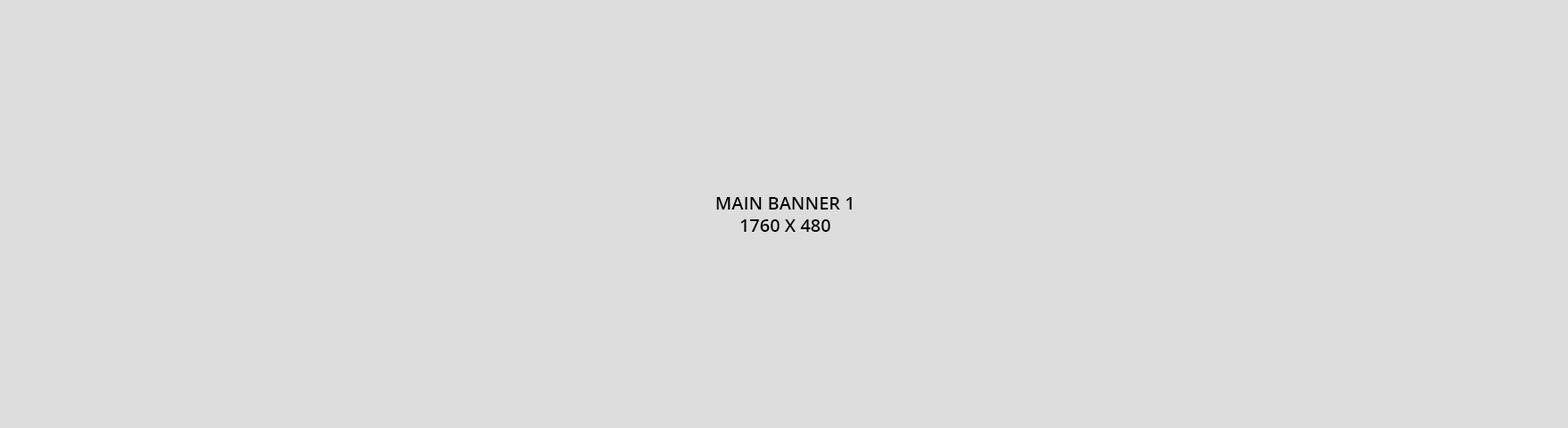
<style>
.page{position:relative;width:1568px;height:428px;background:#dddddd}
.page>*{position:absolute;margin:0}
.t1{font:17.8px/22.3px "OpenSans-Semibold";color:#000000;text-transform:uppercase}
</style>
<div class="page">
<p class="t1" style="left:716px;top:197px;width:136px;height:35px;text-align:center">main banner 1<br>1760 x 480</p>
</div>
